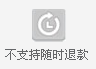
<style>
.page{position:relative;width:96px;height:69px;background:#f4f4f4}
.page>*{position:absolute;margin:0}
.t1{font:12px "SimSun";color:#656668}
</style>
<div class="page">
<p class="t1" style="left:5px;top:49px;width:83px;height:11px">不支持随时退款</p>
</div>
